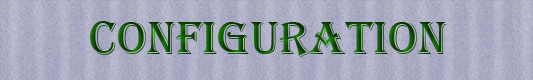
<style>
.page{position:relative;width:533px;height:80px}
.page>*{position:absolute;margin:0}
.t1{font:48px "Algerian"}
</style>
<div class="page">
<p class="t1" style="left:90px;top:21px;width:357px;height:37px">Configuration</p>
</div>
